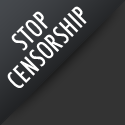
<style>
.page{position:relative;width:125px;height:125px;background:#333333}
.page>*{position:absolute;margin:0}
.t1{font:25px/24px "Futura-CondensedMedium";letter-spacing:0.02em;color:#ffffff}
</style>
<div class="page">
<p class="t1" style="left:7px;top:6px;width:80px;height:82px;text-align:center;rotate:-45deg">STOP<br>CENSORSHIP</p>
</div>
